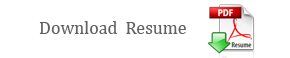
<style>
.page{position:relative;width:290px;height:58px;background:#ffffff}
.page>*{position:absolute;margin:0}
.t1{font:18px "Cambria";color:#616161}
</style>
<div class="page">
<p class="t1" style="left:39px;top:21px;width:147px;height:13px">Download  Resume</p>
</div>
